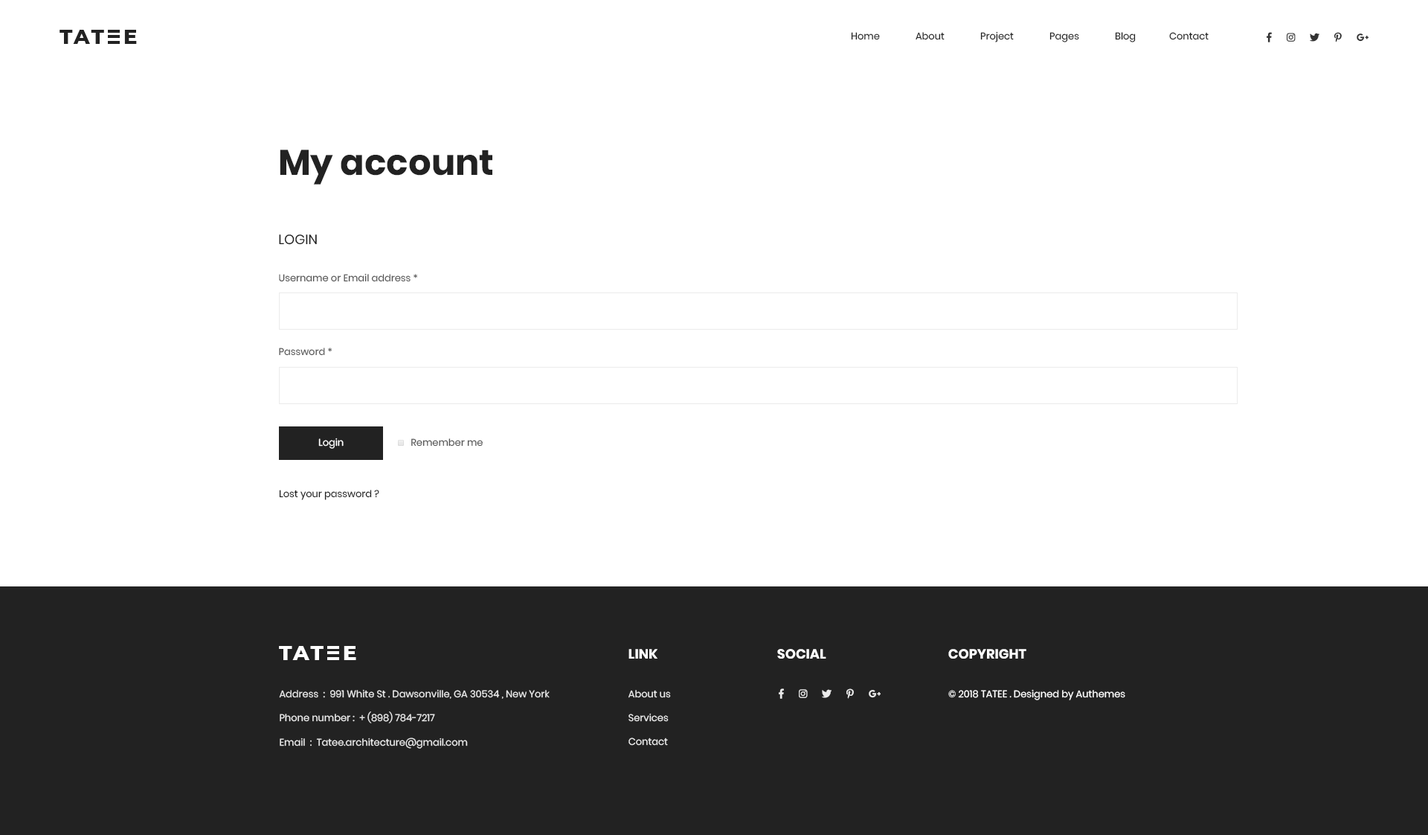
<style>
.page{position:relative;width:1428px;height:835px;background:#ffffff}
.page>*{position:absolute;margin:0}
.t1{font:20.5px "Montserrat-ExtraBold";letter-spacing:0.1em;color:#222222;text-transform:uppercase}
.t2{font:9.7px "Poppins-Regular";color:#222222}
.t3{font:35.7px "Poppins-Bold";color:#222222}
.t4{font:13.4px "Poppins-Regular";color:#222222;text-transform:uppercase}
.t5{font:9.7px "Poppins-Regular";color:#555555}
.t6{font:9.7px "Poppins-Regular";color:#ffffff}
.t7{font:20.5px "Montserrat-ExtraBold";letter-spacing:0.1em;color:#ffffff;text-transform:uppercase}
.t8{font:13.4px "Poppins-Bold";color:#ffffff;text-transform:uppercase}
.t9{font:9.7px "Poppins-Regular";color:#ebebeb}
.t10{font:9.7px/23.8px "Poppins-Regular";color:#ebebeb}
</style>
<div class="page">
<p class="t1" style="left:60px;top:30px;width:44px;height:14px">tat</p>
<p class="t1" style="left:124px;top:30px;width:13px;height:14px">e</p>
<p class="t2" style="left:851px;top:31px;width:358px;height:11px">Home               About               Project               Pages               Blog              Contact</p>
<p class="t3" style="left:280px;top:150px;width:213px;height:35px">My account</p>
<p class="t4" style="left:279px;top:234px;width:38px;height:11px">Login</p>
<p class="t5" style="left:279px;top:273px;width:138px;height:9px">Username or Email address *</p>
<p class="t5" style="left:279px;top:347px;width:53px;height:9px">Password *</p>
<p class="t6" style="left:318px;top:437px;width:26px;height:12px">Login</p>
<p class="t5" style="left:411px;top:438px;width:72px;height:8px">Remember me</p>
<p class="t2" style="left:279px;top:490px;width:100px;height:10px">Lost your password ?</p>
<p class="t7" style="left:279px;top:646px;width:45px;height:14px">tat</p>
<p class="t7" style="left:344px;top:646px;width:12px;height:14px">e</p>
<p class="t8" style="left:629px;top:649px;width:29px;height:9px">Link</p>
<p class="t8" style="left:777px;top:649px;width:50px;height:9px">Social</p>
<p class="t8" style="left:949px;top:649px;width:78px;height:9px">copyright</p>
<p class="t9" style="left:279px;top:689px;width:271px;height:10px">Address  :  991 White St . Dawsonville, GA 30534 , New York</p>
<p class="t10" style="left:629px;top:690px;width:42px;height:55px">About us<br>Services<br>Contact</p>
<p class="t6" style="left:949px;top:689px;width:177px;height:11px">© 2018 TATEE . Designed by Authemes</p>
<p class="t9" style="left:280px;top:711px;width:155px;height:12px">Phone number :  + (898) 784-7217</p>
<p class="t9" style="left:280px;top:737px;width:188px;height:11px">Email  :  Tatee.architecture@gmail.com</p>
</div>
